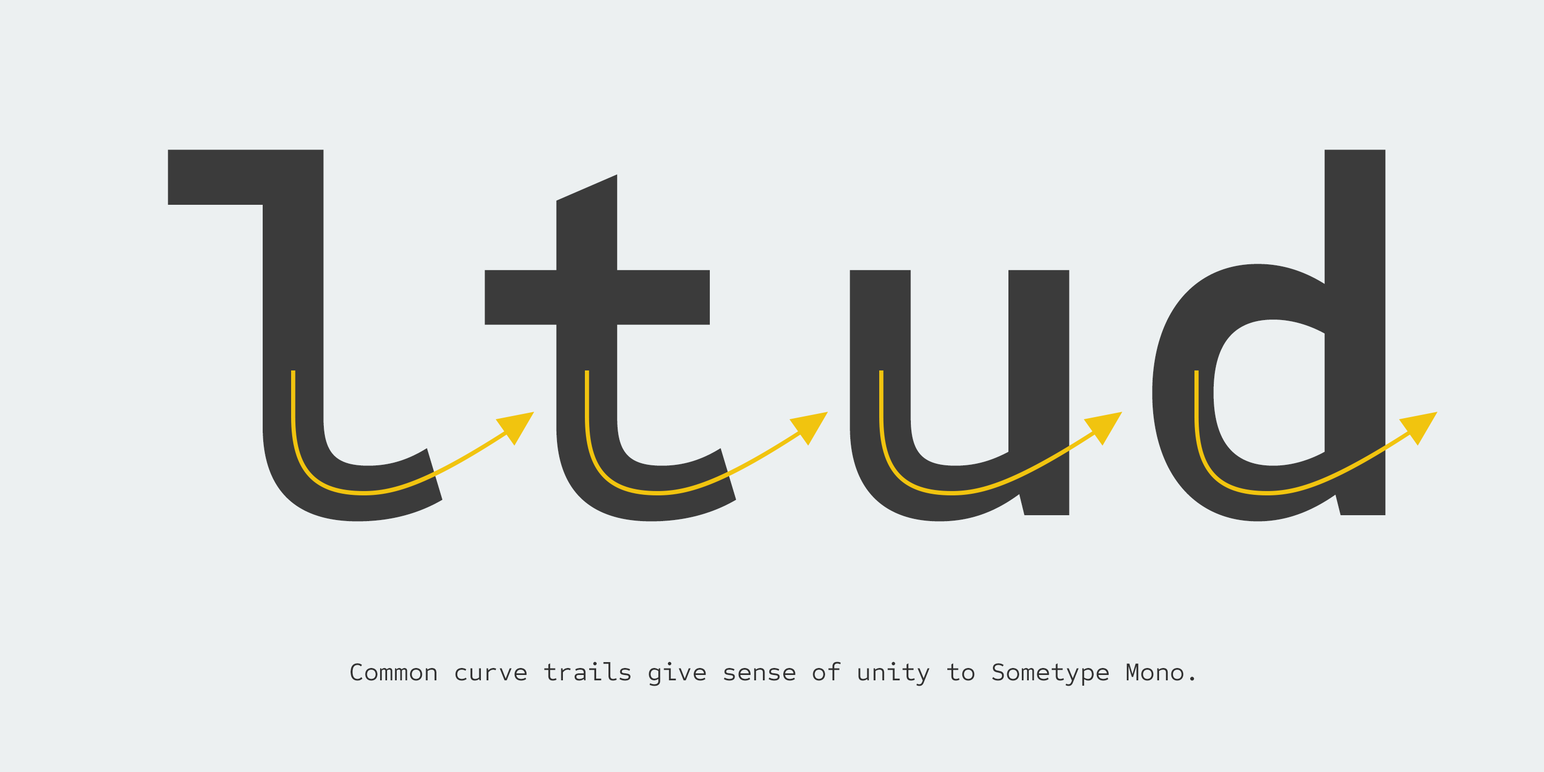
<style>
.page{position:relative;width:1544px;height:772px;background:#ecf0f1}
.page>*{position:absolute;margin:0}
.t1{font:514.8px "SometypeMono-Bold";letter-spacing:0.1em;color:#3b3b3b}
.t2{font:25.7px "SometypeMono-Regular";color:#313131}
</style>
<div class="page">
<p class="t1" style="left:168px;top:150px;width:275px;height:372px">l</p>
<p class="t1" style="left:1152px;top:150px;width:234px;height:372px">d</p>
<p class="t1" style="left:485px;top:174px;width:251px;height:348px">t</p>
<p class="t1" style="left:850px;top:270px;width:220px;height:252px">u</p>
<p class="t2" style="left:351px;top:662px;width:844px;height:24px">Common curve trails give sense of unity to Sometype Mono.</p>
</div>
